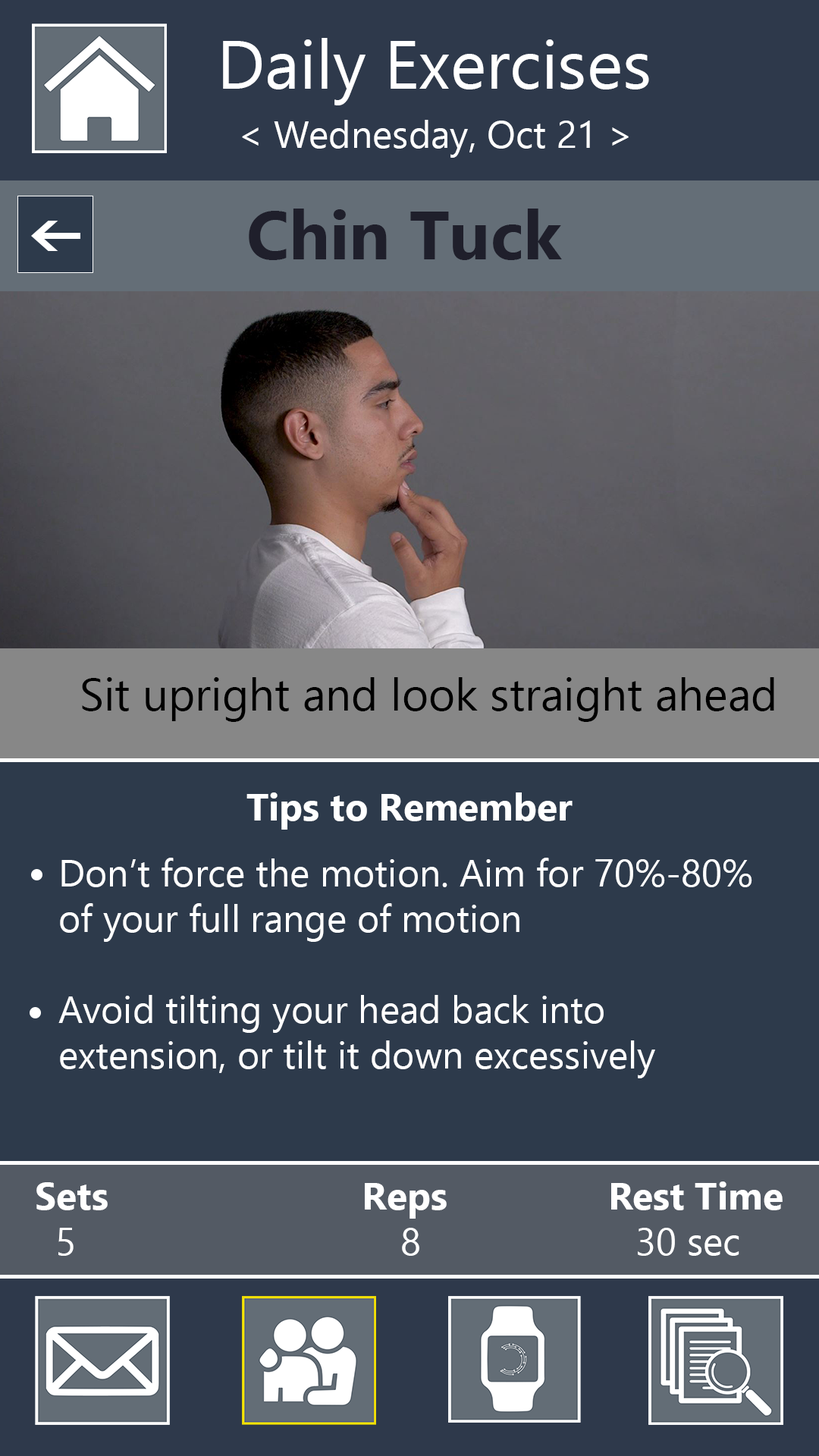
<style>
.page{position:relative;width:819px;height:1456px;background:#2d3a4b}
.page>*{position:absolute;margin:0}
.t1{font:68.2px "Ebrima";color:#ffffff}
.t2{font:37.9px "Ebrima";color:#ffffff}
.t3{font:68.2px "Ebrima-Bold";color:#1f1f2b}
.t4{font:45.5px "Ebrima";color:#000000}
.t5{font:37.9px "Ebrima-Bold";color:#ffffff}
</style>
<div class="page">
<p class="t1" style="left:223px;top:38px;width:426px;height:67px">Daily Exercises</p>
<p class="t2" style="left:242px;top:120px;width:387px;height:38px">&lt; Wednesday, Oct 21 &gt;</p>
<p class="t3" style="left:249px;top:209px;width:313px;height:51px">Chin Tuck</p>
<p class="t4" style="left:82px;top:677px;width:692px;height:45px">Sit upright and look straight ahead</p>
<p class="t5" style="left:246px;top:792px;width:327px;height:38px">Tips to Remember</p>
<p class="t2" style="left:58px;top:858px;width:694px;height:220px">Don’t force the motion. Aim for 70%-80% <br>of your full range of motion<br><br>Avoid tilting your head back into <br>extension, or tilt it down excessively</p>
<p class="t5" style="left:36px;top:1181px;width:747px;height:75px;text-align:center">Sets                  Reps              Rest Time<br><span class="t2">  5               8        30 sec</span></p>
</div>
